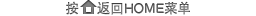
<style>
.page{position:relative;width:256px;height:16px;background:#ffffff}
.page>*{position:absolute;margin:0}
.t1{font:13.3px "DFPHeiW5-GB";color:#797979}
.t2{font:13.3px "DFPHeiW5-GB";letter-spacing:1.36em;color:#797979}
.t3{font:13.3px "DFPHeiW5-GB";letter-spacing:3.04em;color:#797979}
</style>
<div class="page">
<p class="t1" style="left:66px;top:1px;width:124px;height:14px"><span class="t2">按</span>返<span class="t3">回</span>菜单</p>
</div>
